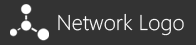
<style>
.page{position:relative;width:196px;height:45px;background:#333333}
.page>*{position:absolute;margin:0}
.t1{font:21.6px "SegoeWP-Light";color:#ffffff}
</style>
<div class="page">
<p class="t1" style="left:58px;top:13px;width:126px;height:23px">Network Logo</p>
</div>
